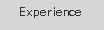
<style>
.page{position:relative;width:104px;height:30px;background:#d6d6d6}
.page>*{position:absolute;margin:0}
.t1{font:12px "SHeadG";color:#333333;scale:0.95 1}
</style>
<div class="page">
<p class="t1" style="left:20px;top:7px;width:61px;height:11px">Experience</p>
</div>
